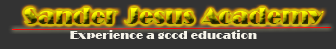
<style>
.page{position:relative;width:336px;height:49px;background:#333333}
.page>*{position:absolute;margin:0}
.t1{font:24px "Broadway"}
.t2{font:12px "Broadway";color:#f5f3e9}
</style>
<div class="page">
<p class="t1" style="left:24px;top:8px;width:300px;height:16px">Sander Jesus Academy</p>
<p class="t2" style="left:70px;top:30px;width:187px;height:9px">Experience a good education</p>
</div>
